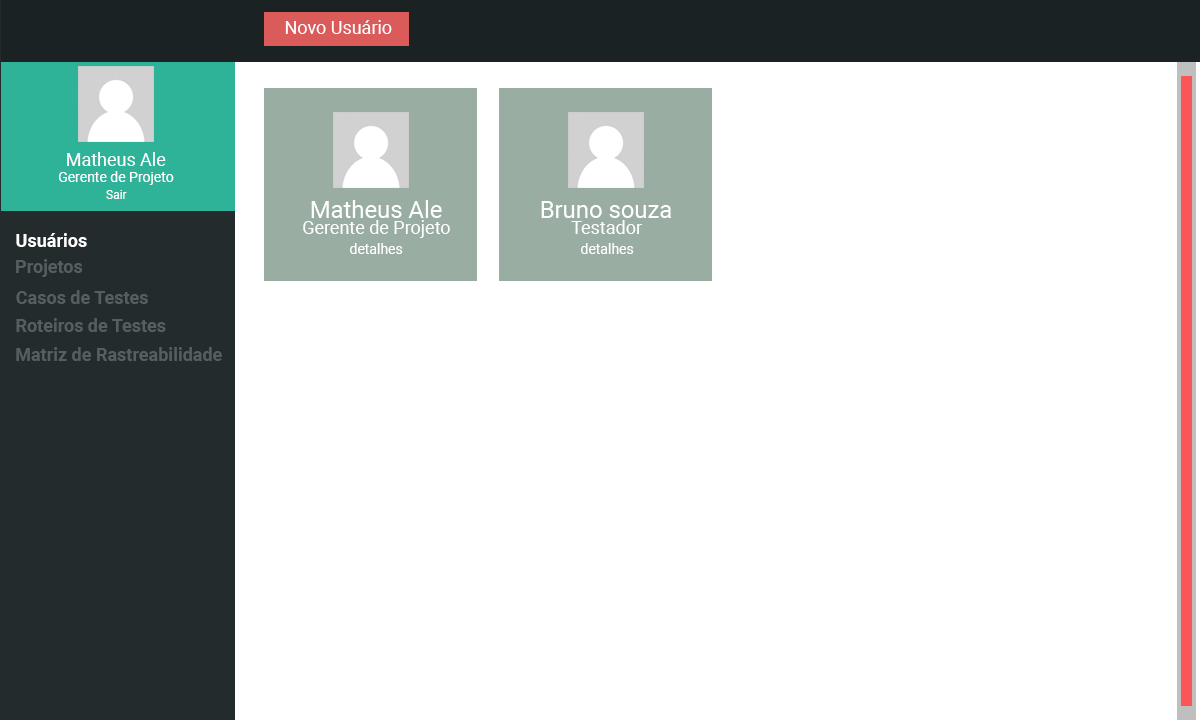
<style>
.page{position:relative;width:1200px;height:720px;background:#ffffff}
.page>*{position:absolute;margin:0}
.t1{font:18px "Roboto-Regular";color:#ffffff}
.t2{font:18.1px "Roboto-Regular";color:#ffffff}
.t3{font:14.1px "Roboto-Regular";color:#ffffff}
.t4{font:12.1px "Roboto-Regular";color:#ffffff}
.t5{font:24px "Roboto-Regular";color:#ffffff}
.t6{font:18px "Roboto-Bold";color:#ffffff}
.t7{font:14px "Roboto-Regular";color:#ffffff}
.t8{font:18px "Roboto-Bold";color:#545f61}
</style>
<div class="page">
<p class="t1" style="left:285px;top:20px;width:107px;height:14px">Novo Usuário</p>
<p class="t2" style="left:67px;top:152px;width:99px;height:14px">Matheus Ale</p>
<p class="t3" style="left:59px;top:171px;width:115px;height:14px">Gerente de Projeto</p>
<p class="t4" style="left:106px;top:190px;width:21px;height:9px">Sair</p>
<p class="t5" style="left:311px;top:200px;width:131px;height:18px">Matheus Ale</p>
<p class="t5" style="left:541px;top:201px;width:130px;height:17px">Bruno souza</p>
<p class="t2" style="left:303px;top:220px;width:147px;height:18px">Gerente de Projeto</p>
<p class="t2" style="left:571px;top:220px;width:71px;height:14px">Testador</p>
<p class="t6" style="left:16px;top:233px;width:71px;height:14px">Usuários</p>
<p class="t7" style="left:350px;top:243px;width:53px;height:11px">detalhes</p>
<p class="t7" style="left:581px;top:243px;width:53px;height:11px">detalhes</p>
<p class="t8" style="left:16px;top:259px;width:67px;height:18px">Projetos</p>
<p class="t8" style="left:16px;top:290px;width:132px;height:14px">Casos de Testes</p>
<p class="t8" style="left:16px;top:318px;width:150px;height:14px">Roteiros de Testes</p>
<p class="t8" style="left:16px;top:347px;width:206px;height:14px">Matriz de Rastreabilidade</p>
</div>
